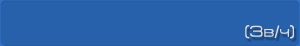
<style>
.page{position:relative;width:300px;height:46px;background:#2861ab}
.page>*{position:absolute;margin:0}
.t1{font:15.1px "Europe_Ext";color:#dcdcdc}
</style>
<div class="page">
<p class="t1" style="left:245px;top:25px;width:49px;height:14px">(Зв/ч)</p>
</div>
